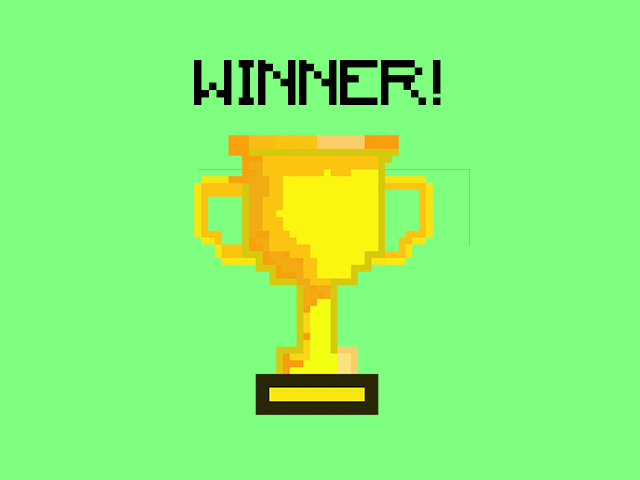
<style>
.page{position:relative;width:640px;height:480px;background:#7fff7f}
.page>*{position:absolute;margin:0}
.t1{font:60px "Minecraft";color:#000000}
</style>
<div class="page">
<p class="t1" style="left:194px;top:60px;width:232px;height:45px">WINNER</p>
<p class="t1" style="left:433px;top:60px;width:8px;height:45px">!</p>
</div>
